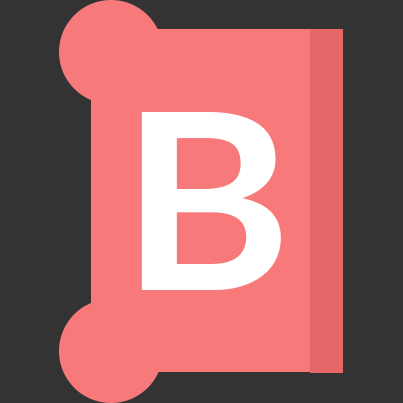
<style>
.page{position:relative;width:403px;height:403px;background:#333333}
.page>*{position:absolute;margin:0}
.t1{font:246.5px "Lato-Bold";color:#ffffff;scale:1.05 1}
</style>
<div class="page">
<p class="t1" style="left:141px;top:112px;width:140px;height:178px">B</p>
</div>
